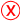
<style>
.page{position:relative;width:20px;height:21px;background:#ffffff}
.page>*{position:absolute;margin:0}
.t1{font:21.6px "MyriadPro-Regular";color:#fd0000}
</style>
<div class="page">
<p class="t1" style="left:6px;top:5px;width:10px;height:11px">x</p>
</div>
